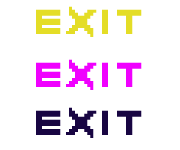
<style>
.page{position:relative;width:180px;height:150px;background:#ffffff}
.page>*{position:absolute;margin:0}
.t1{font:48.5px "Vermin-Vibes-1989";letter-spacing:0.12em;color:#e4dd26}
.t2{font:48.5px "Vermin-Vibes-1989";letter-spacing:0.12em;color:#f000ff}
.t3{font:48.5px "Vermin-Vibes-1989";letter-spacing:0.12em;color:#180542}
</style>
<div class="page">
<p class="t1" style="left:36px;top:6px;width:106px;height:31px">Exit</p>
<p class="t2" style="left:36px;top:59px;width:106px;height:31px">EXIT</p>
<p class="t3" style="left:36px;top:107px;width:106px;height:31px">EXIT</p>
</div>
